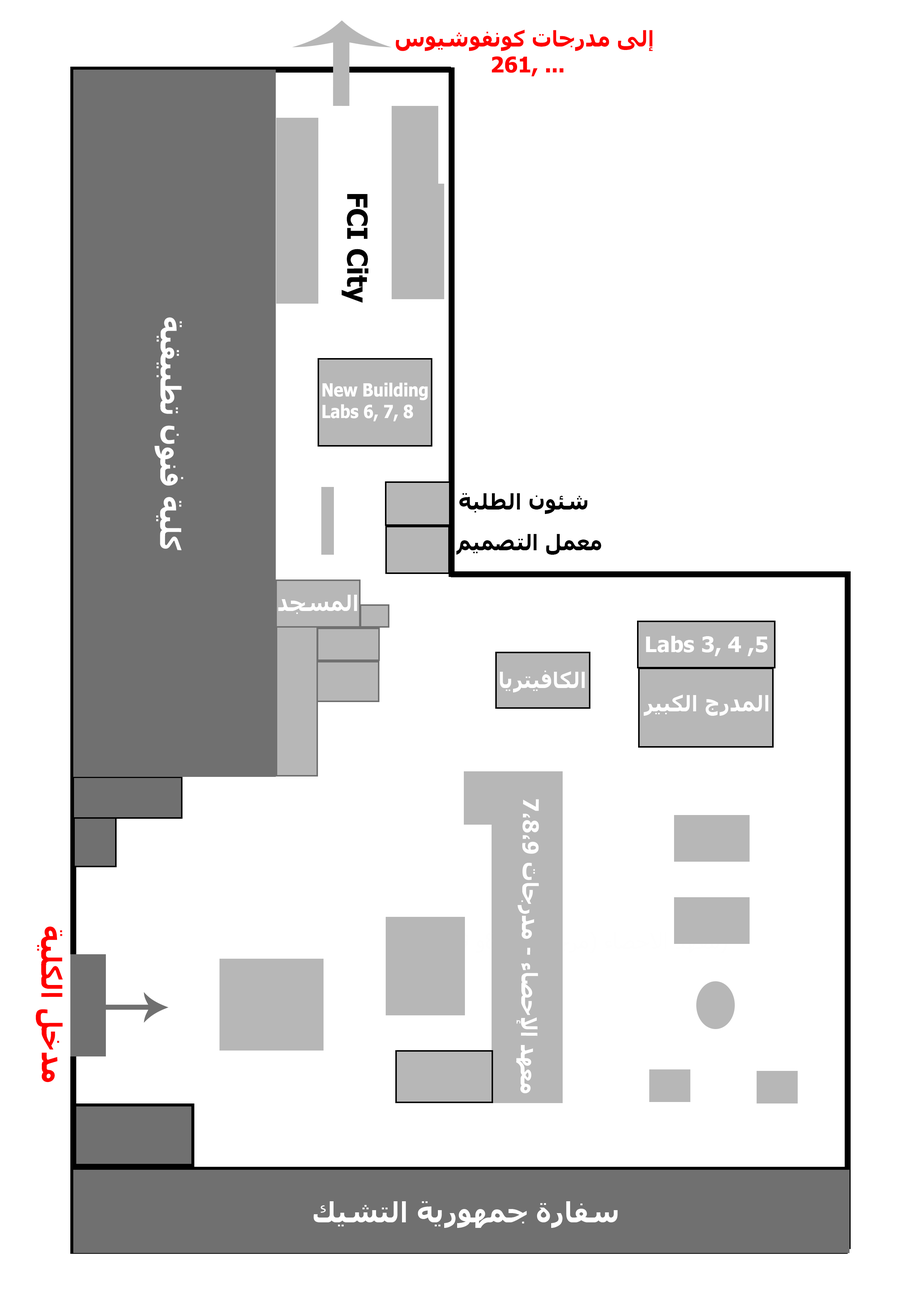
<style>
.page{position:relative;width:918px;height:1299px;background:#ffffff}
.page>*{position:absolute;margin:0}
.t1{font:21.6px "Tahoma-Bold";color:#ff0000}
.t2{font:27.8px "Tahoma-Bold";color:#000000}
.t3{font:27.8px "Tahoma-Bold";color:#ffffff}
.t4{font:18px "Tahoma-Bold";color:#ffffff;scale:0.89 1}
.t5{font:21.6px "Tahoma-Bold";color:#000000}
.t6{font:21.6px "Tahoma-Bold";color:#ffffff}
.t7{font:27.8px "Tahoma-Bold";color:#ff0000}
</style>
<div class="page">
<p class="t1" style="left:396px;top:30px;width:257px;height:47px;text-align:center">إلى مدرجات كونفوشيوس <br>261, ...</p>
<p class="t2" style="left:342px;top:194px;width:27px;height:109px;rotate:90deg">FCI City</p>
<p class="t3" style="left:154px;top:317px;width:29px;height:233px;rotate:90deg">كلية فنون تطبيقية</p>
<p class="t4" style="left:322px;top:382px;width:106px;height:39px">New Building<br>Labs 6, 7, 8</p>
<p class="t5" style="left:459px;top:493px;width:129px;height:21px">شئون الطلبة</p>
<p class="t5" style="left:456px;top:534px;width:146px;height:21px">معمل التصميم</p>
<p class="t6" style="left:278px;top:595px;width:79px;height:19px">المسجد</p>
<p class="t6" style="left:646px;top:636px;width:122px;height:20px">Labs 3, 4 ,5</p>
<p class="t6" style="left:500px;top:670px;width:85px;height:22px">الكافيتريا</p>
<p class="t6" style="left:644px;top:694px;width:125px;height:22px">المدرج الكبير</p>
<p class="t6" style="left:516px;top:799px;width:23px;height:294px;rotate:91deg">معهد الإحصاء - مدرجات 7،8،9</p>
<p class="t7" style="left:36px;top:926px;width:27px;height:156px;rotate:90deg">مدخل الكلية</p>
<p class="t3" style="left:314px;top:1201px;width:304px;height:27px">سفارة جمهورية التشيك</p>
</div>
